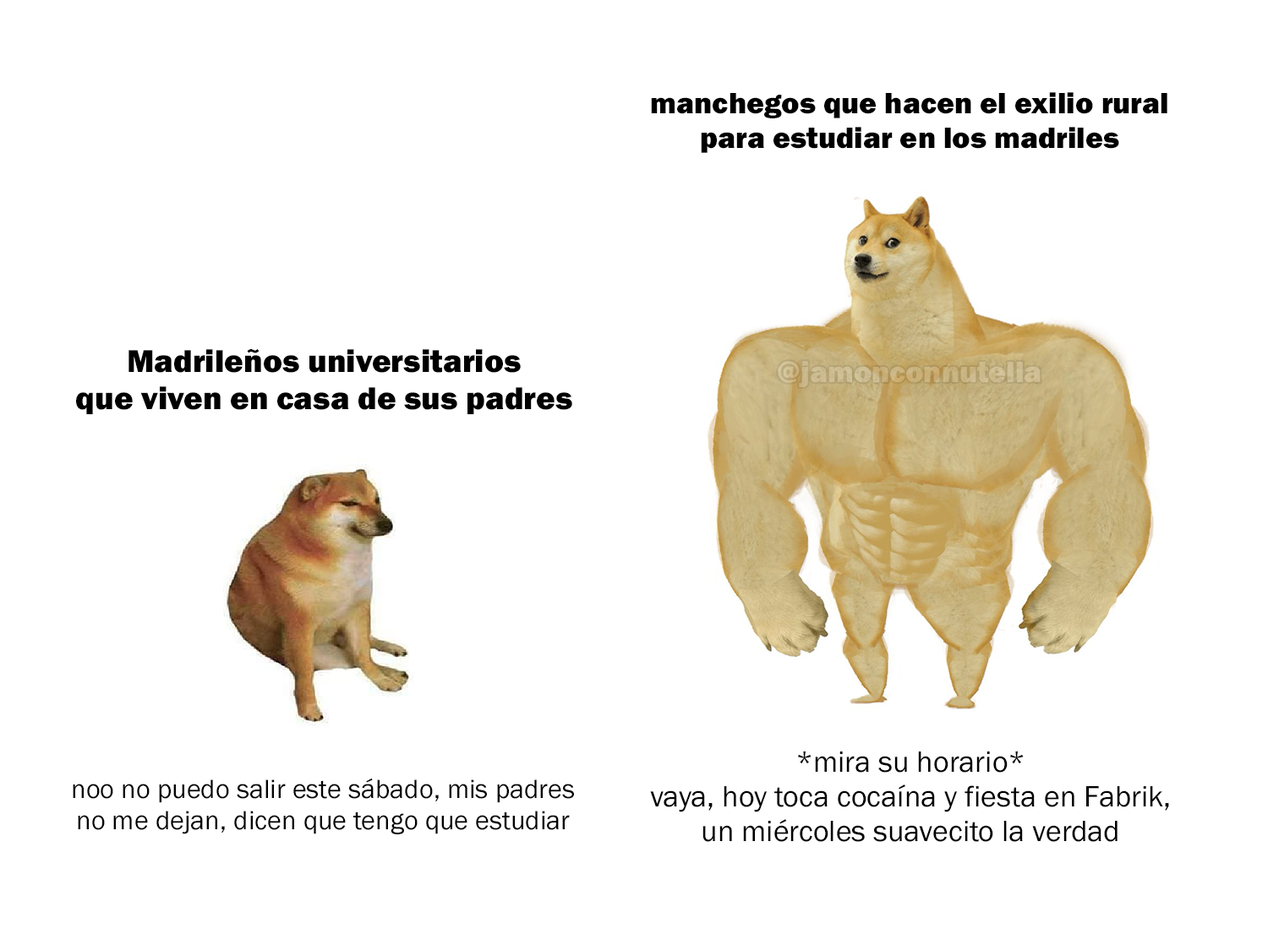
<style>
.page{position:relative;width:1268px;height:940px;background:#ffffff}
.page>*{position:absolute;margin:0}
.t1{font:30.4px "FranklinGothic-Heavy";color:#000000}
.t2{font:32.7px "FranklinGothic-Heavy";color:#000000}
.t3{font:30.4px "FranklinGothic-Heavy";color:#ccb98e}
.t4{font:30.4px "FranklinGothic-Book";color:#000000}
.t5{font:27.4px "FranklinGothic-Book";color:#000000}
</style>
<div class="page">
<p class="t1" style="left:651px;top:92px;width:517px;height:61px;text-align:center">manchegos que hacen el exilio rural<br>para estudiar en los madriles</p>
<p class="t2" style="left:76px;top:349px;width:496px;height:65px;text-align:center">Madrileños universitarios<br>que viven en casa de sus padres</p>
<p class="t3" style="left:778px;top:361px;width:263px;height:26px">@jamonconnutella</p>
<p class="t4" style="left:650px;top:752px;width:519px;height:90px;text-align:center">*mira su horario*<br>vaya, hoy toca cocaína y fiesta en Fabrik,<br>un miércoles suavecito la verdad</p>
<p class="t5" style="left:73px;top:778px;width:501px;height:57px;text-align:center">noo no puedo salir este sábado, mis padres<br>no me dejan, dicen que tengo que estudiar</p>
</div>
